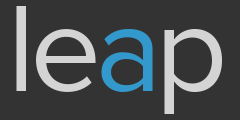
<style>
.page{position:relative;width:240px;height:120px;background:#333333}
.page>*{position:absolute;margin:0}
.t1{font:126.8px "ProximaNova-Regular";letter-spacing:-0.05em;color:#d4d4d4}
.t2{font:126.8px "ProximaNova-Regular";letter-spacing:-0.05em;color:#3399cc}
</style>
<div class="page">
<p class="t1" style="left:16px;top:6px;width:206px;height:108px">le<span class="t2">a</span>p</p>
</div>
